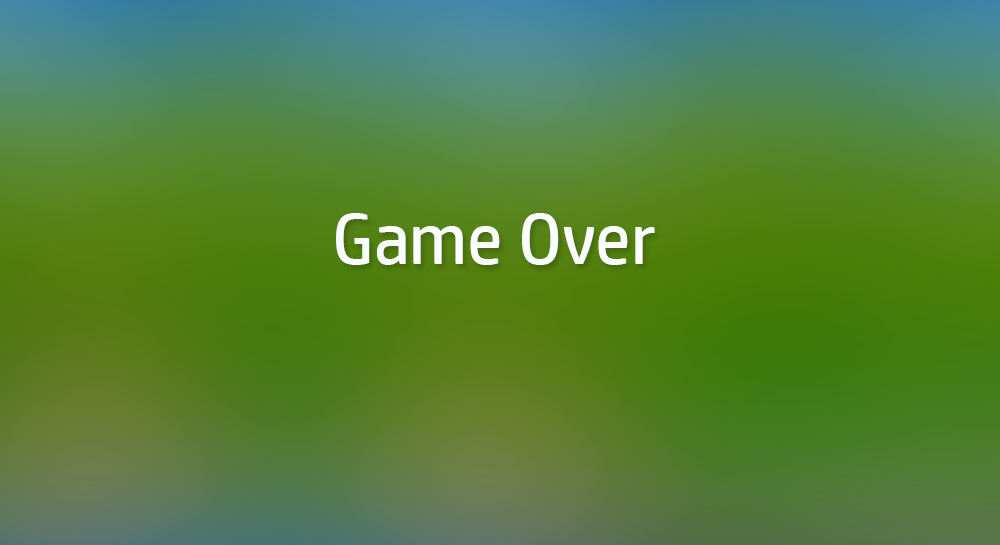
<style>
.page{position:relative;width:1000px;height:545px}
.page>*{position:absolute;margin:0}
.t1{font:72px "HPSimplified-Regular";color:#fafdfd}
</style>
<div class="page">
<p class="t1" style="left:336px;top:213px;width:319px;height:52px">Game Over</p>
</div>
